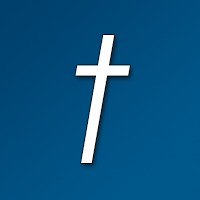
<style>
.page{position:relative;width:200px;height:200px}
.page>*{position:absolute;margin:0}
.t1{font:208.3px "WalkwayBold";letter-spacing:-0.005em;color:#ffffff;font-style:italic}
</style>
<div class="page">
<p class="t1" style="left:75px;top:35px;width:55px;height:128px">t</p>
</div>
